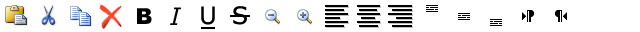
<style>
.page{position:relative;width:640px;height:32px;background:#ffffff}
.page>*{position:absolute;margin:0}
.t1{font:24px "Verdana";color:#000000}
.t2{font:22px "Arial-Black";color:#000000}
.t3{font:24px "Verdana-Italic";color:#000000}
</style>
<div class="page">
<p class="t1" style="left:201px;top:6px;width:14px;height:19px">U</p>
<p class="t1" style="left:233px;top:6px;width:14px;height:19px">S</p>
<p class="t2" style="left:137px;top:8px;width:15px;height:16px">B</p>
<p class="t3" style="left:170px;top:7px;width:11px;height:18px">I</p>
</div>
